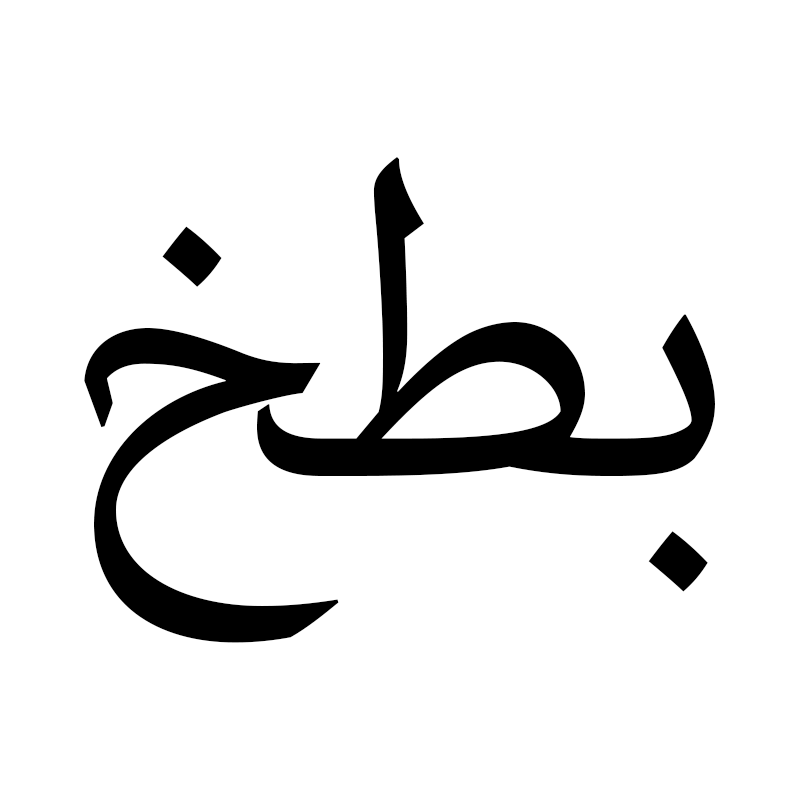
<style>
.page{position:relative;width:800px;height:800px;background:#ffffff}
.page>*{position:absolute;margin:0}
.t1{font:600px "AdobeArabic-Regular";color:#000000}
</style>
<div class="page">
<p class="t1" style="left:84px;top:157px;width:631px;height:486px">بطخ</p>
</div>
